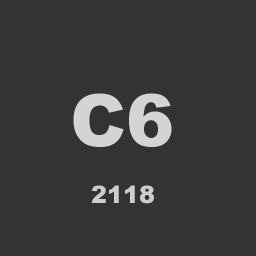
<style>
.page{position:relative;width:256px;height:256px;background:#333333}
.page>*{position:absolute;margin:0}
.t1{font:72px "Arial-Black";color:#d5d4d4}
.t2{font:24px "Arial-Black";color:#cecccc}
</style>
<div class="page">
<p class="t1" style="left:73px;top:93px;width:99px;height:54px">C6</p>
<p class="t2" style="left:91px;top:185px;width:63px;height:19px">2118</p>
</div>
